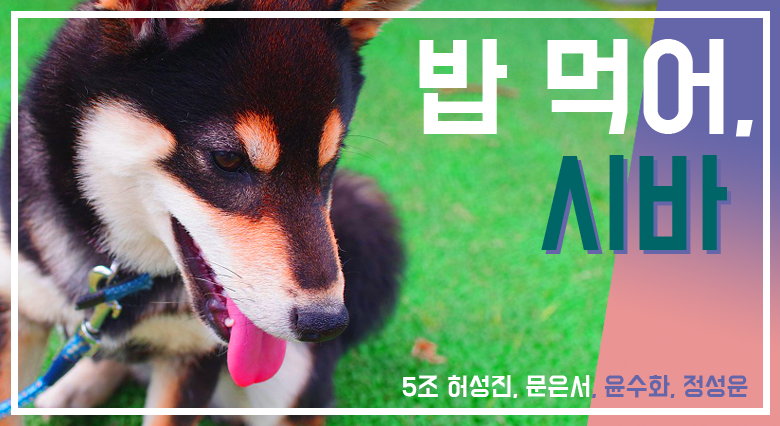
<style>
.page{position:relative;width:780px;height:426px}
.page>*{position:absolute;margin:0}
.t1{font:100px "BMDoHyeon";color:#ffffff}
.t2{font:100px "BMDoHyeon";color:#6566aa}
.t3{font:100px "BMDoHyeon";color:#006566}
.t4{font:22.9px "BMDoHyeon";color:#ffffff}
.t5{font:22.9px "BMDoHyeon";color:#6566aa}
</style>
<div class="page">
<p class="t1" style="left:419px;top:39px;width:334px;height:215px">밥 먹어,<br>    <span class="t2">시바</span></p>
<p class="t3" style="left:541px;top:155px;width:186px;height:95px"><span class="t1"><br>    </span>시바</p>
<p class="t4" style="left:402px;top:375px;width:346px;height:23px">5조 허성진, 문은서<span class="t5">, 윤수화, 정성운</span></p>
</div>
